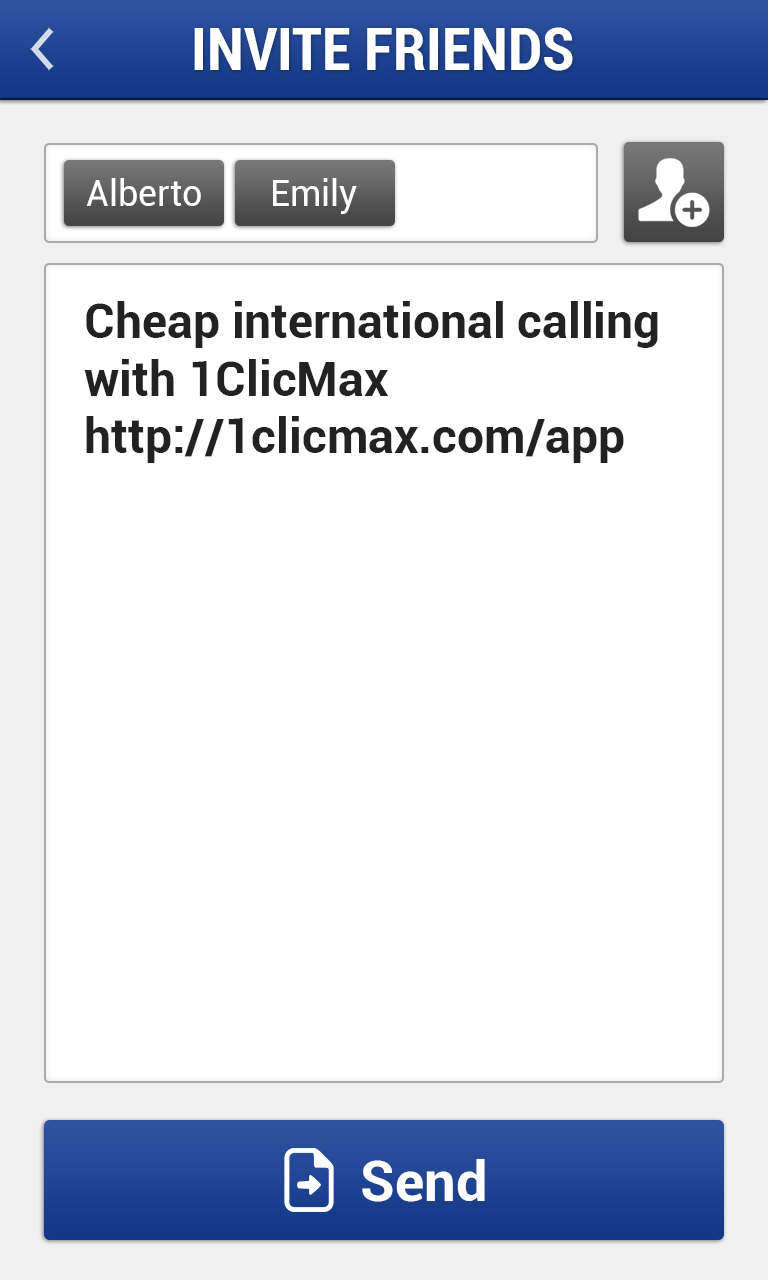
<style>
.page{position:relative;width:768px;height:1280px;background:#ffffff}
.page>*{position:absolute;margin:0}
.t1{font:60px "Roboto-BoldCondensed";color:#ffffff}
.t2{font:36px "Roboto-Regular";color:#ffffff}
.t3{font:48px "Roboto-Bold";color:#222222}
.t4{font:56px "Roboto-Bold";color:#ffffff}
</style>
<div class="page">
<p class="t1" style="left:194px;top:27px;width:379px;height:44px">INVITE FRIENDS</p>
<p class="t2" style="left:86px;top:178px;width:115px;height:28px">Alberto</p>
<p class="t2" style="left:273px;top:178px;width:84px;height:36px">Emily</p>
<p class="t3" style="left:84px;top:301px;width:574px;height:162px">Cheap international calling with 1ClicMax<br>http://1clicmax.com/app</p>
<p class="t4" style="left:362px;top:1159px;width:123px;height:43px">Send</p>
</div>
